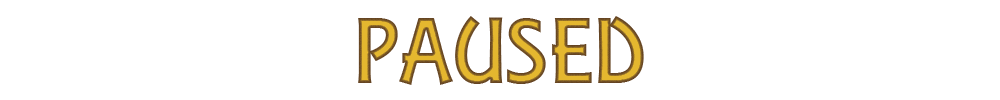
<style>
.page{position:relative;width:1000px;height:100px;background:#ffffff}
.page>*{position:absolute;margin:0}
.t1{font:100px "ARESSENCE"}
</style>
<div class="page">
<p class="t1" style="left:358px;top:16px;width:286px;height:69px">PAUSED</p>
</div>
